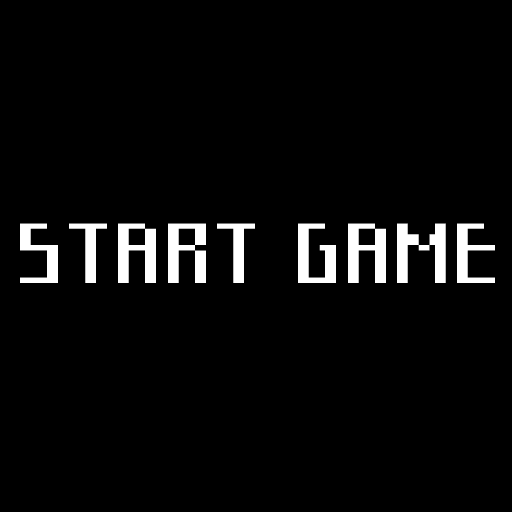
<style>
.page{position:relative;width:512px;height:512px;background:#000000}
.page>*{position:absolute;margin:0}
.t1{font:79.2px "Starcadia";color:#ffffff}
</style>
<div class="page">
<p class="t1" style="left:20px;top:223px;width:475px;height:60px">START GAME</p>
</div>
